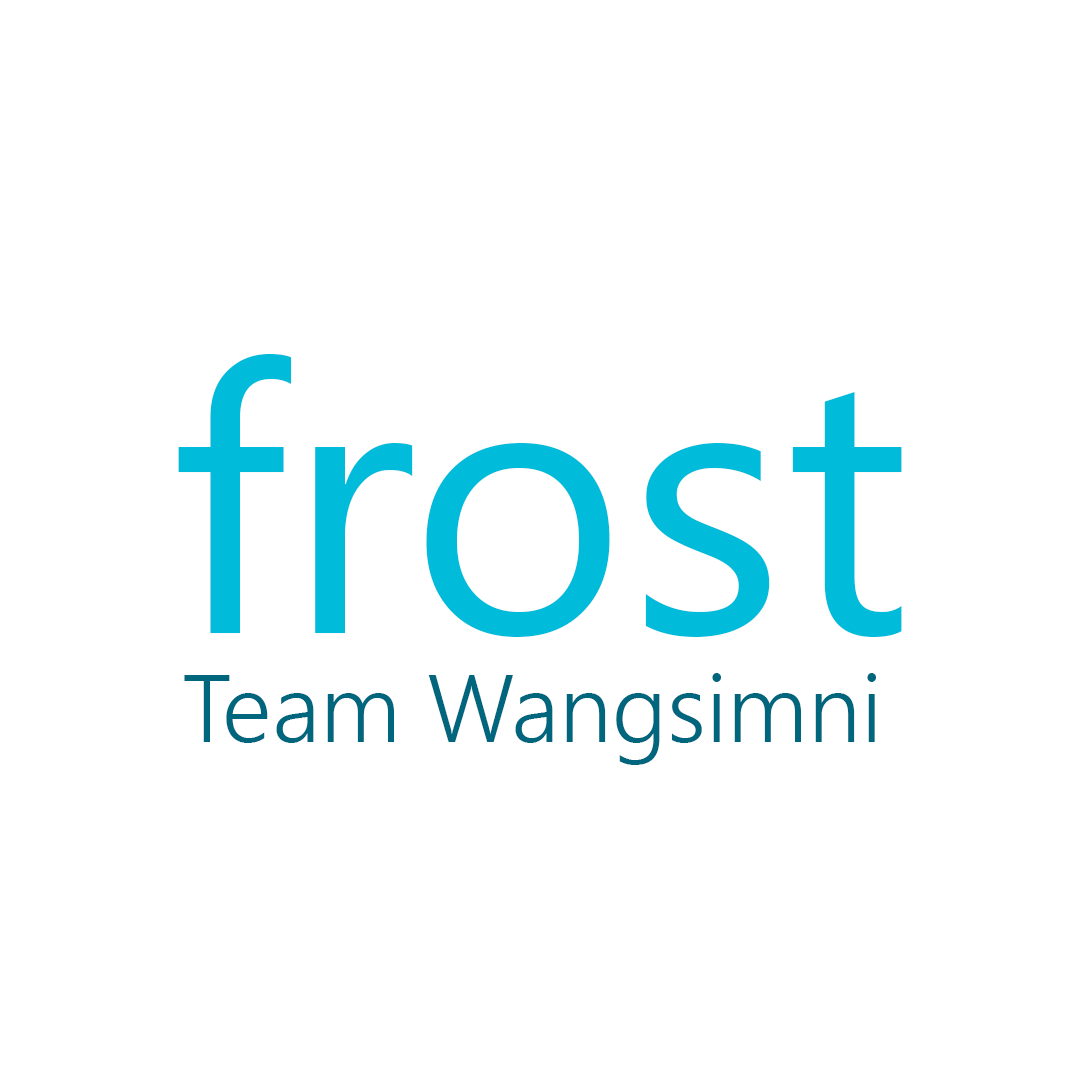
<style>
.page{position:relative;width:1080px;height:1080px;background:#ffffff}
.page>*{position:absolute;margin:0}
.t1{font:372px "SegoeUI";color:#00bcda}
.t2{font:96px "SegoeUI-Semilight";color:#00667d}
</style>
<div class="page">
<p class="t1" style="left:178px;top:354px;width:724px;height:283px">frost</p>
<p class="t2" style="left:184px;top:673px;width:692px;height:92px">Team Wangsimni</p>
</div>
